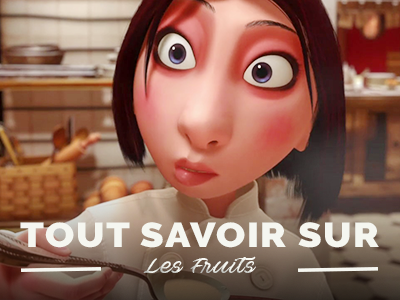
<style>
.page{position:relative;width:400px;height:300px}
.page>*{position:absolute;margin:0}
.t1{font:34.5px "Raleway-Black";letter-spacing:0.04em;color:#f5f6f0;scale:1.11 1}
.t2{font:20.7px "AveBetwanPERSONALUSEONLY";letter-spacing:0.04em;color:#f5f6f0;scale:1.11 1}
</style>
<div class="page">
<p class="t1" style="left:20px;top:222px;width:359px;height:26px">TOUT SAVOIR SUR</p>
<p class="t2" style="left:143px;top:256px;width:113px;height:17px">Les Fruits</p>
</div>
